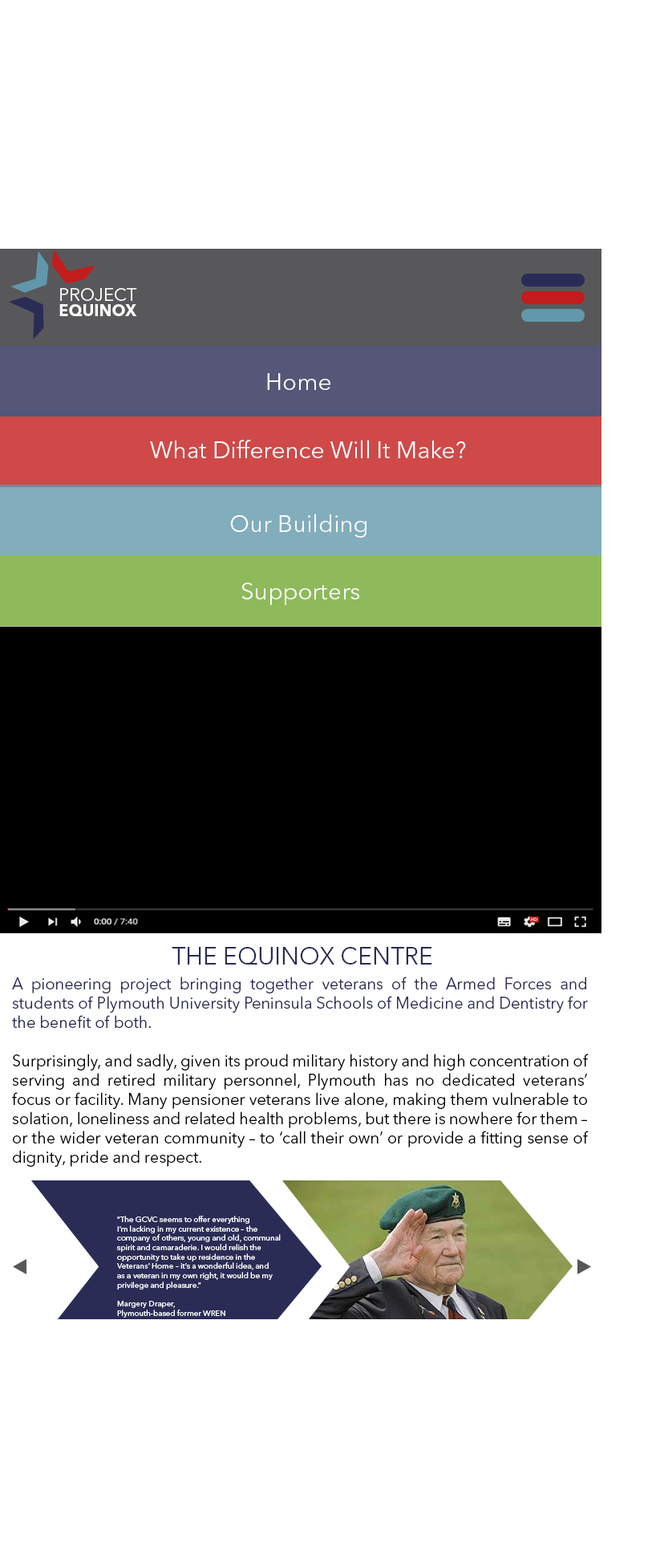
<style>
.page{position:relative;width:648px;height:1568px;background:#ffffff}
.page>*{position:absolute;margin:0}
.t1{font:23.7px "AvenirNextLTPro-Regular";color:#ffffff}
.t2{font:24.1px "AvenirNextLTPro-Regular";color:#2a2c56}
.t3{font:16px "AvenirNextLTPro-Regular";color:#000000}
.t4{font:16px "AvenirNextLTPro-Regular";color:#2a2c56}
.t5{font:7.8px "AvenirNextLTPro-Regular";color:#ffffff}
</style>
<div class="page">
<p class="t1" style="left:267px;top:373px;width:64px;height:17px">Home</p>
<p class="t1" style="left:150px;top:440px;width:316px;height:18px">What Difference Will It Make?</p>
<p class="t1" style="left:230px;top:514px;width:137px;height:24px">Our Building</p>
<p class="t1" style="left:242px;top:583px;width:118px;height:22px">Supporters</p>
<p class="t2" style="left:172px;top:947px;width:261px;height:18px">THE EQUINOX CENTRE</p>
<p class="t3" style="left:12px;top:977px;width:577px;height:190px;text-align:justify"><span class="t4">A pioneering project bringing together veterans of the Armed Forces and students of Plymouth University Peninsula Schools of Medicine and Dentistry for the benefit of both.<br><br></span>Surprisingly, and sadly, given its proud military history and high concentration of serving and retired military personnel, Plymouth has no dedicated veterans’ focus or facility. Many pensioner veterans live alone, making them vulnerable to solation, loneliness and related health problems, but there is nowhere for them – or the wider veteran community – to ‘call their own’ or provide a fitting sense of dignity, pride and respect.</p>
<p class="t5" style="left:116px;top:1216px;width:165px;height:102px;text-align:justify">“The GCVC seems to offer everything<br>I’m lacking in my current existence – the<br>company of others, young and old, communal<br>spirit and camaraderie. I would relish the<br>opportunity to take up residence in the<br>Veterans’ Home – it’s a wonderful idea, and<br>as a veteran in my own right, it would be my<br>privilege and pleasure.”<br><br>Margery Draper,<br>Plymouth-based former WREN</p>
</div>
